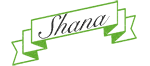
<style>
.page{position:relative;width:150px;height:66px;background:#ffffff}
.page>*{position:absolute;margin:0}
.t1{font:26.9px "SnellRoundhand";color:#2f2f2f;scale:1.09 1}
</style>
<div class="page">
<p class="t1" style="left:38px;top:13px;width:72px;height:26px;rotate:-13deg">Shana</p>
</div>
